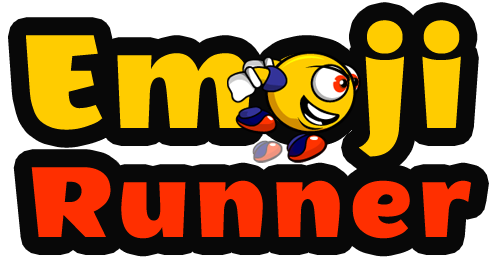
<style>
.page{position:relative;width:496px;height:279px;background:#080808}
.page>*{position:absolute;margin:0}
.t1{font:153px "WendyOne-Regular";letter-spacing:0.06em;color:#ffcc00}
.t2{font:115px "WendyOne-Regular";letter-spacing:0.06em;color:#ff2f00}
</style>
<div class="page">
<p class="t1" style="left:26px;top:20px;width:435px;height:137px">Emoji</p>
<p class="t2" style="left:31px;top:167px;width:440px;height:72px">Runner</p>
</div>
